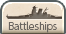
<style>
.page{position:relative;width:66px;height:34px}
.page>*{position:absolute;margin:0}
.t1{font:10px "UDShinGoPro-Light";color:#6a6560;scale:0.9 1}
</style>
<div class="page">
<p class="t1" style="left:8px;top:21px;width:49px;height:12px">Battleships</p>
</div>
